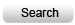
<style>
.page{position:relative;width:75px;height:25px;background:#ffffff}
.page>*{position:absolute;margin:0}
.t1{font:12px "ArialMT";color:#010101}
</style>
<div class="page">
<p class="t1" style="left:21px;top:8px;width:38px;height:9px">Search</p>
</div>
